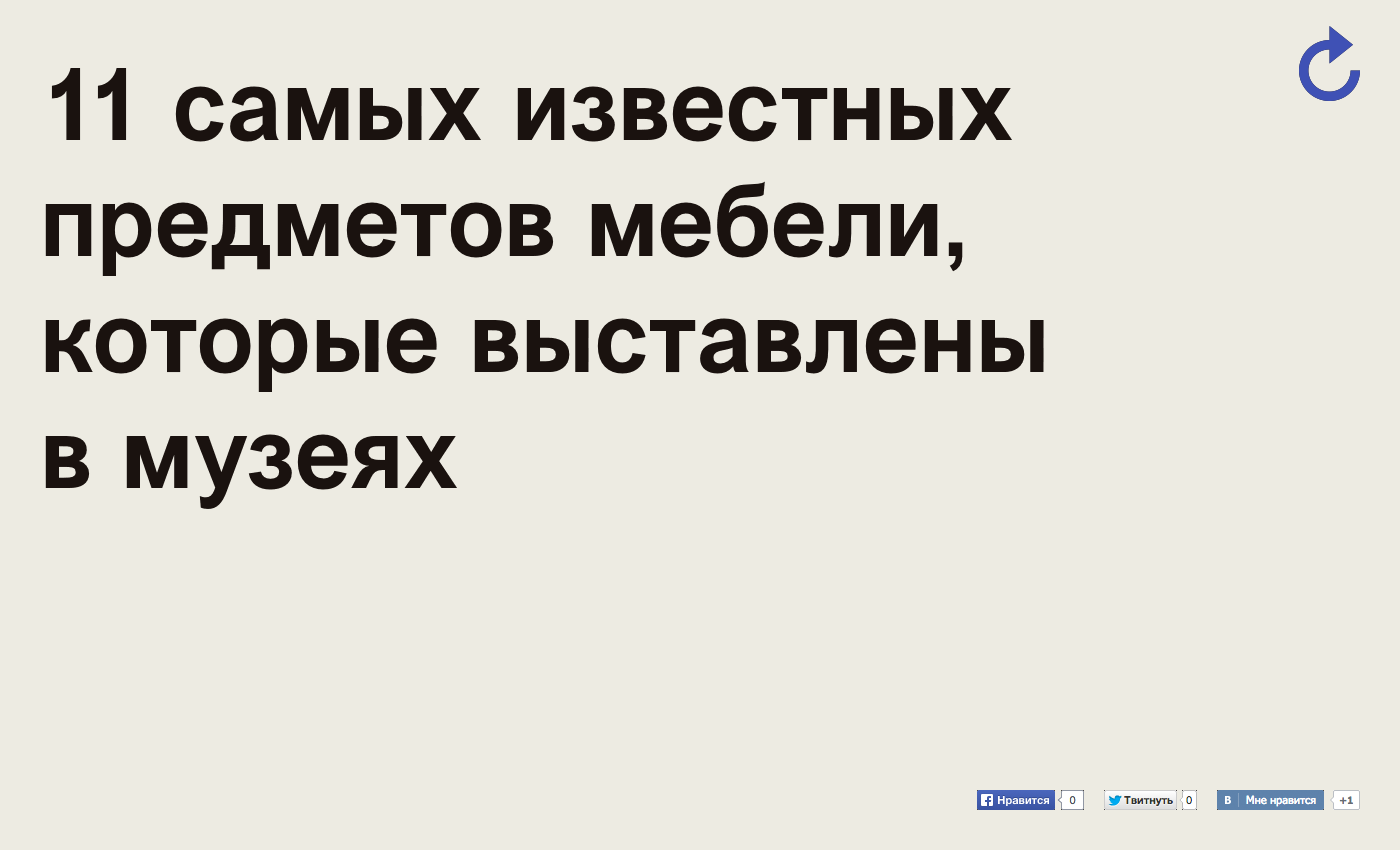
<style>
.page{position:relative;width:1400px;height:850px;background:#edebe2}
.page>*{position:absolute;margin:0}
.t1{font:100px/116px "VremenaGroteskMedium";letter-spacing:0.008em;color:#1a120f}
</style>
<div class="page">
<p class="t1" style="left:45px;top:68px;width:999px;height:441px">11 самых известных предметов мебели, которые выставлены <br>в музеях</p>
</div>
